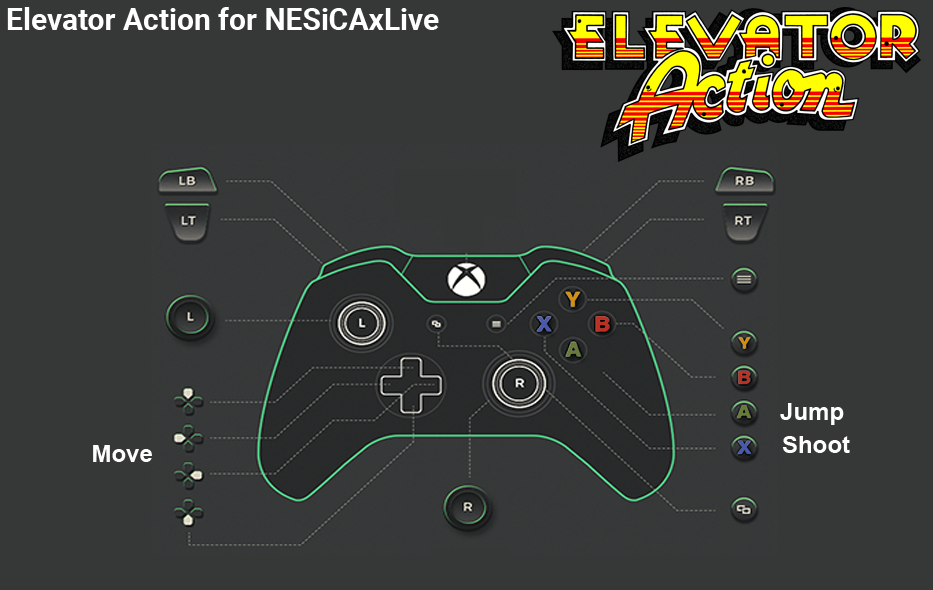
<style>
.page{position:relative;width:933px;height:590px;background:#363838}
.page>*{position:absolute;margin:0}
.t1{font:30px "Roboto-Bold";color:#ffffff}
.t2{font:24px "Arial-BoldMT";color:#fefefe}
</style>
<div class="page">
<p class="t1" style="left:7px;top:7px;width:432px;height:23px">Elevator Action for NESiCAxLive</p>
<p class="t2" style="left:780px;top:403px;width:64px;height:22px">Jump</p>
<p class="t2" style="left:782px;top:436px;width:68px;height:17px">Shoot</p>
<p class="t2" style="left:93px;top:445px;width:59px;height:17px">Move</p>
</div>
